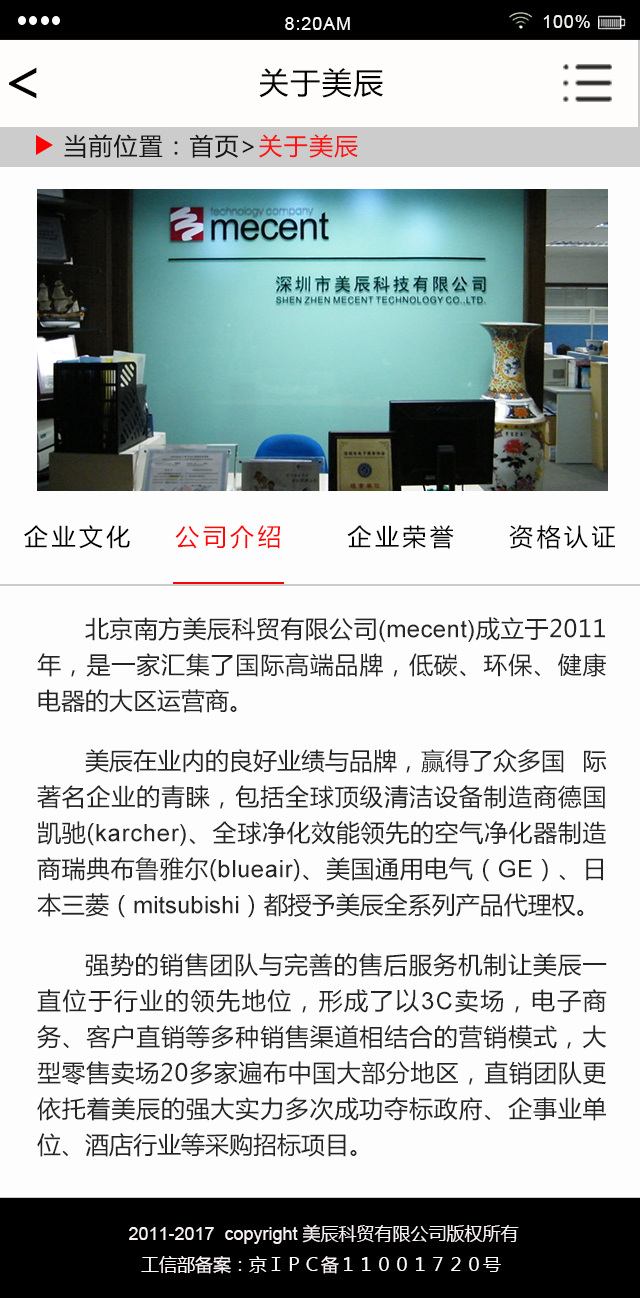
<style>
.page{position:relative;width:640px;height:1298px;background:#fdfdfd}
.page>*{position:absolute;margin:0}
.t1{font:18px "ArialMT";letter-spacing:0.05em;color:#f9faf7}
.t2{font:18px "ArialMT";letter-spacing:0.05em;color:#f1f4ee}
.t3{font:60px "MicrosoftYaHei";letter-spacing:0.05em;color:#020202}
.t4{font:30px "MicrosoftYaHei";letter-spacing:0.05em;color:#020202}
.t5{font:24px "MicrosoftYaHei";letter-spacing:0.05em;color:#000000}
.t6{font:24px "MicrosoftYaHei";letter-spacing:0.05em;color:#ff0101}
.t7{font:24px "MicrosoftYaHei";letter-spacing:0.14em;color:#060606}
.t8{font:24px "MicrosoftYaHei";letter-spacing:0.14em;color:#000000}
.t9{font:24px "MicrosoftYaHei";letter-spacing:0.14em;color:#fb0808}
.t10{font:24px/36px "MicrosoftYaHei";color:#252525}
.t11{font:24px/36px "ArialMT";color:#252525}
.t12{font:18px/3px "ArialMT";color:#f8f1f1}
.t13{font:18px/3px "MicrosoftYaHei";color:#f8f1f1}
.t14{font:18px/31px "MicrosoftYaHei";color:#fff9f9}
</style>
<div class="page">
<p class="t1" style="left:285px;top:17px;width:65px;height:13px">8:20AM</p>
<p class="t2" style="left:543px;top:15px;width:47px;height:13px">100%</p>
<p class="t3" style="left:9px;top:67px;width:28px;height:32px">&lt;</p>
<p class="t4" style="left:259px;top:68px;width:124px;height:30px">关于美辰</p>
<p class="t5" style="left:64px;top:134px;width:294px;height:24px;opacity:0.9">当前位置：首页&gt;<span class="t6">关于美辰</span></p>
<p class="t7" style="left:24px;top:525px;width:591px;height:24px"><span class="t8"> 企业文化    </span><span class="t9">公司介绍      </span>企业荣誉     资格认证</p>
<p class="t10" style="left:37px;top:617px;width:570px;height:540px;text-align:justify">北京南方美辰科贸有限公司<span class="t11">(mecent)</span>成立于2011年，是一家汇集了国际高端品牌，低碳、环保、健康电器的大区运营商。 <br>美辰在业内的良好业绩与品牌，赢得了众多国 际著名企业的青睐，包括全球顶级清洁设备制造商德国凯驰(<span class="t11">karcher)</span>、全球净化效能领先的空气净化器制造商瑞典布鲁雅尔(<span class="t11">blueair</span>)、美国通用电气（<span class="t11">GE</span>）、日本三菱（<span class="t11">mitsubishi</span>）都授予美辰全系列产品代理权。 <br>强势的销售团队与完善的售后服务机制让美辰一直位于行业的领先地位，形成了以<span class="t11">3C</span>卖场，电子商务、客户直销等多种销售渠道相结合的营销模式，大型零售卖场20多家遍布中国大部分地区，直销团队更依托着美辰的强大实力多次成功夺标政府、企事业单位、酒店行业等采购招标项目。</p>
<p class="t12" style="left:129px;top:1224px;width:390px;height:50px;text-align:justify">2011-2017  copyright <span class="t13">美辰科贸有限公司版权所有<br></span><span class="t14">工信部备案：京ＩＰＣ备１１００１７２０号</span></p>
</div>
